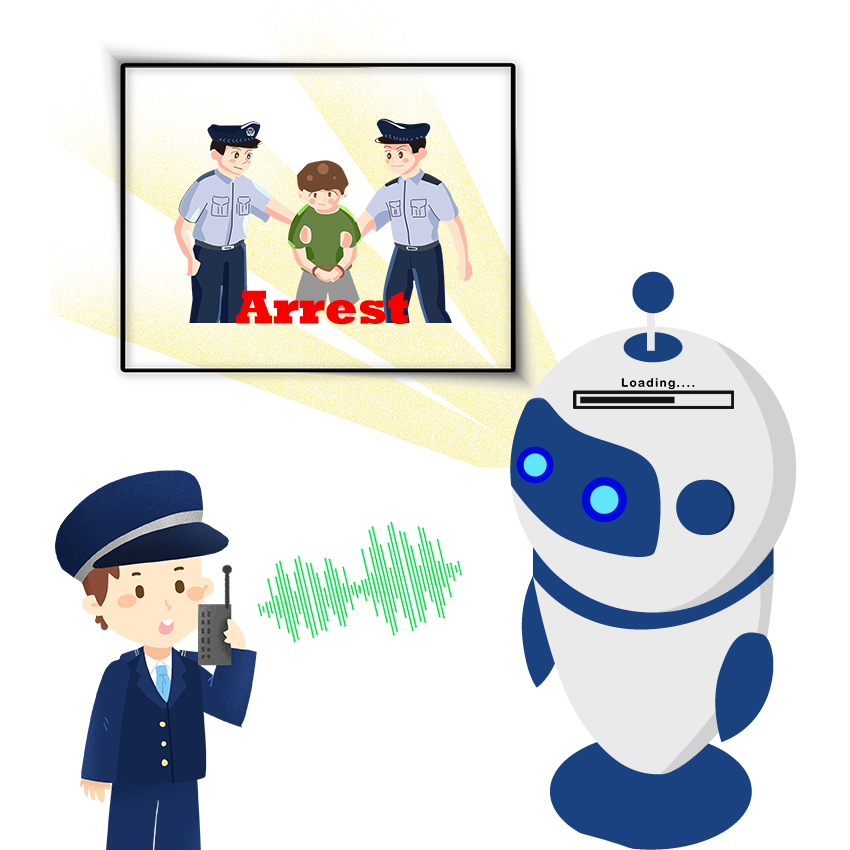
<style>
.page{position:relative;width:850px;height:850px;background:#ffffff}
.page>*{position:absolute;margin:0}
.t1{font:48px "Rockwell-ExtraBold";color:#f90000}
</style>
<div class="page">
<p class="t1" style="left:236px;top:290px;width:172px;height:35px">Arrest</p>
</div>
